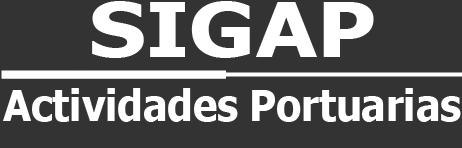
<style>
.page{position:relative;width:462px;height:148px;background:#333333}
.page>*{position:absolute;margin:0}
.t1{font:74.9px "Tahoma-Bold";color:#ffffff;scale:1.19 1}
.t2{font:42.9px "Tahoma-Bold";color:#ffffff;scale:0.95 1}
</style>
<div class="page">
<p class="t1" style="left:92px;top:1px;width:282px;height:57px">SIGAP</p>
<p class="t2" style="left:3px;top:88px;width:458px;height:34px">Actividades Portuarias</p>
</div>
